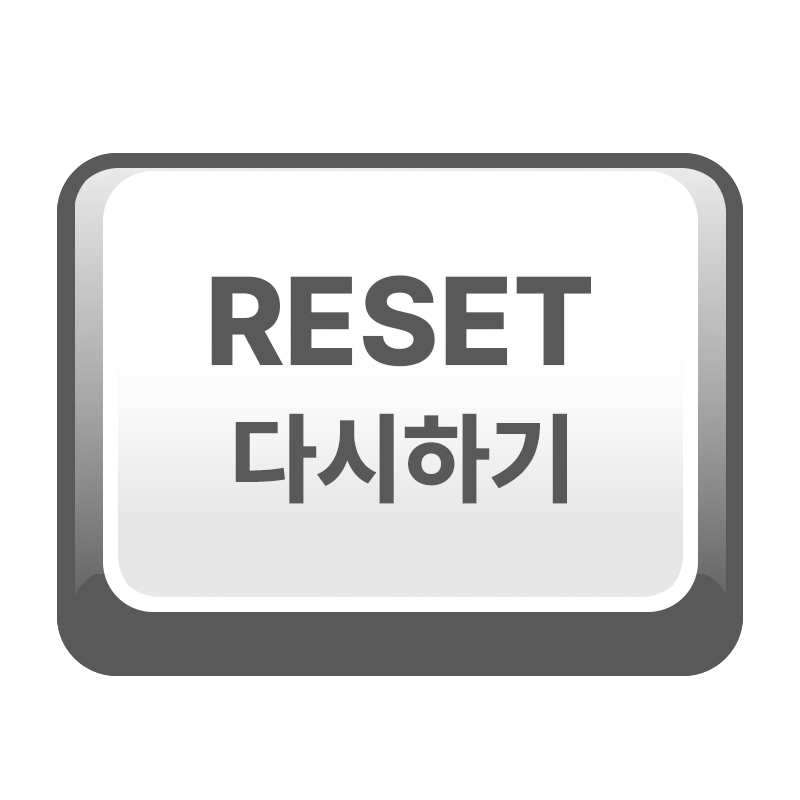
<style>
.page{position:relative;width:800px;height:800px;background:#ffffff}
.page>*{position:absolute;margin:0}
.t1{font:125px "Pretendard-ExtraBold";color:#595959}
.t2{font:100px "Pretendard-ExtraBold";color:#595959}
</style>
<div class="page">
<p class="t1" style="left:211px;top:275px;width:380px;height:92px">RESET</p>
<p class="t2" style="left:235px;top:413px;width:332px;height:91px">다시하기</p>
</div>
